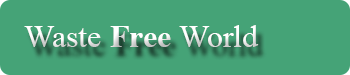
<style>
.page{position:relative;width:350px;height:75px;background:#45a377}
.page>*{position:absolute;margin:0}
.t1{font:32px "TimesNewRomanPSMT";color:#ffffff}
.t2{font:32px "TimesNewRomanPS-BoldMT";color:#ffffff}
</style>
<div class="page">
<p class="t1" style="left:24px;top:25px;width:235px;height:22px">Waste <span class="t2">Free </span>World</p>
</div>
